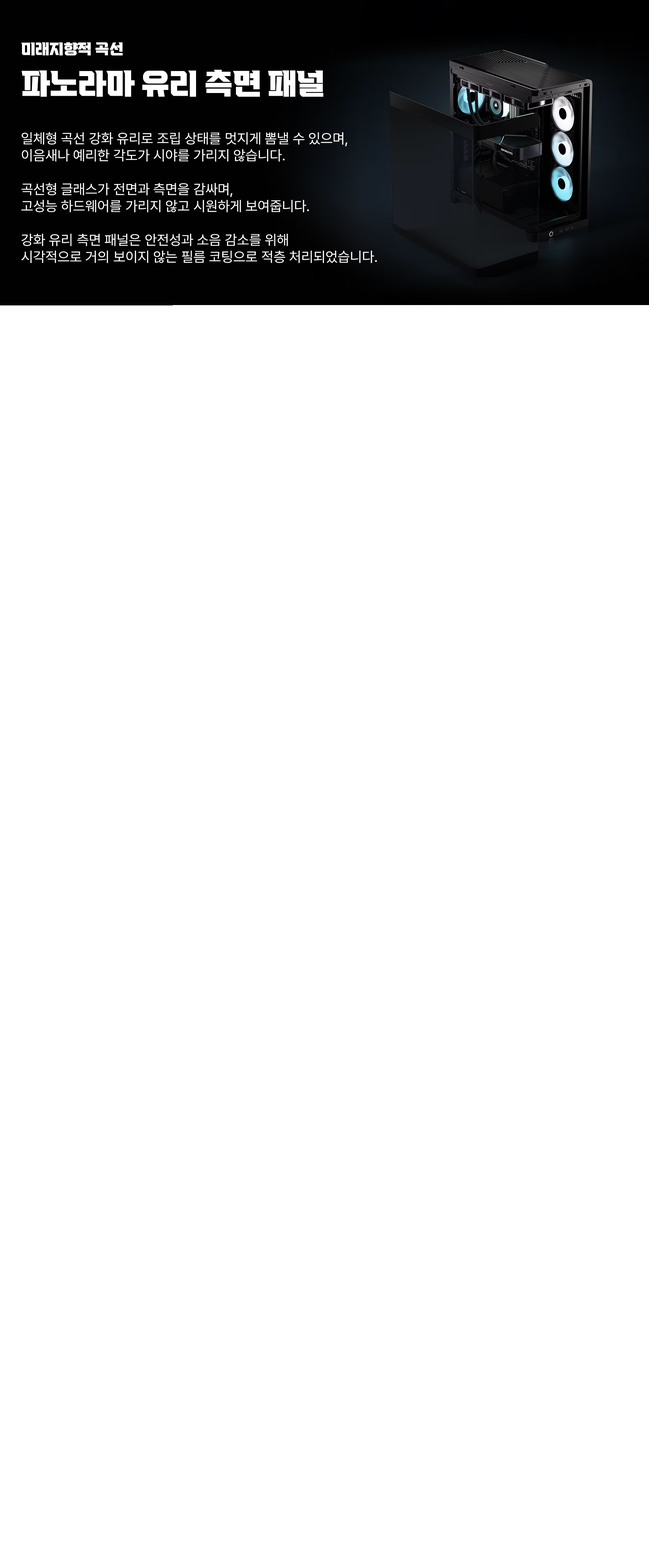
<style>
.page{position:relative;width:649px;height:1568px;background:#ffffff}
.page>*{position:absolute;margin:0}
.t1{font:14.1px "VITRO-CORE-OTF";color:#ffffff}
.t2{font:28.2px "VITRO-CORE-OTF";color:#ffffff}
.t3{font:14.1px/16.9px "Pretendard-Regular";color:#ffffff}
</style>
<div class="page">
<p class="t1" style="left:21px;top:42px;width:102px;height:13px">미래지향적 곡선</p>
<p class="t2" style="left:22px;top:70px;width:302px;height:27px">파노라마 유리 측면 패널</p>
<p class="t3" style="left:21px;top:132px;width:356px;height:131px">일체형 곡선 강화 유리로 조립 상태를 멋지게 뽐낼 수 있으며,<br>이음새나 예리한 각도가 시야를 가리지 않습니다.<br><br>곡선형 글래스가 전면과 측면을 감싸며,<br>고성능 하드웨어를 가리지 않고 시원하게 보여줍니다.<br><br>강화 유리 측면 패널은 안전성과 소음 감소를 위해<br>시각적으로 거의 보이지 않는 필름 코팅으로 적층 처리되었습니다.</p>
</div>
